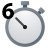
<style>
.page{position:relative;width:50px;height:50px;background:#ffffff}
.page>*{position:absolute;margin:0}
.t1{font:24px "MyriadHebrew-Bold";color:#000000}
</style>
<div class="page">
<p class="t1" style="left:2px;top:3px;width:12px;height:16px">6</p>
</div>
